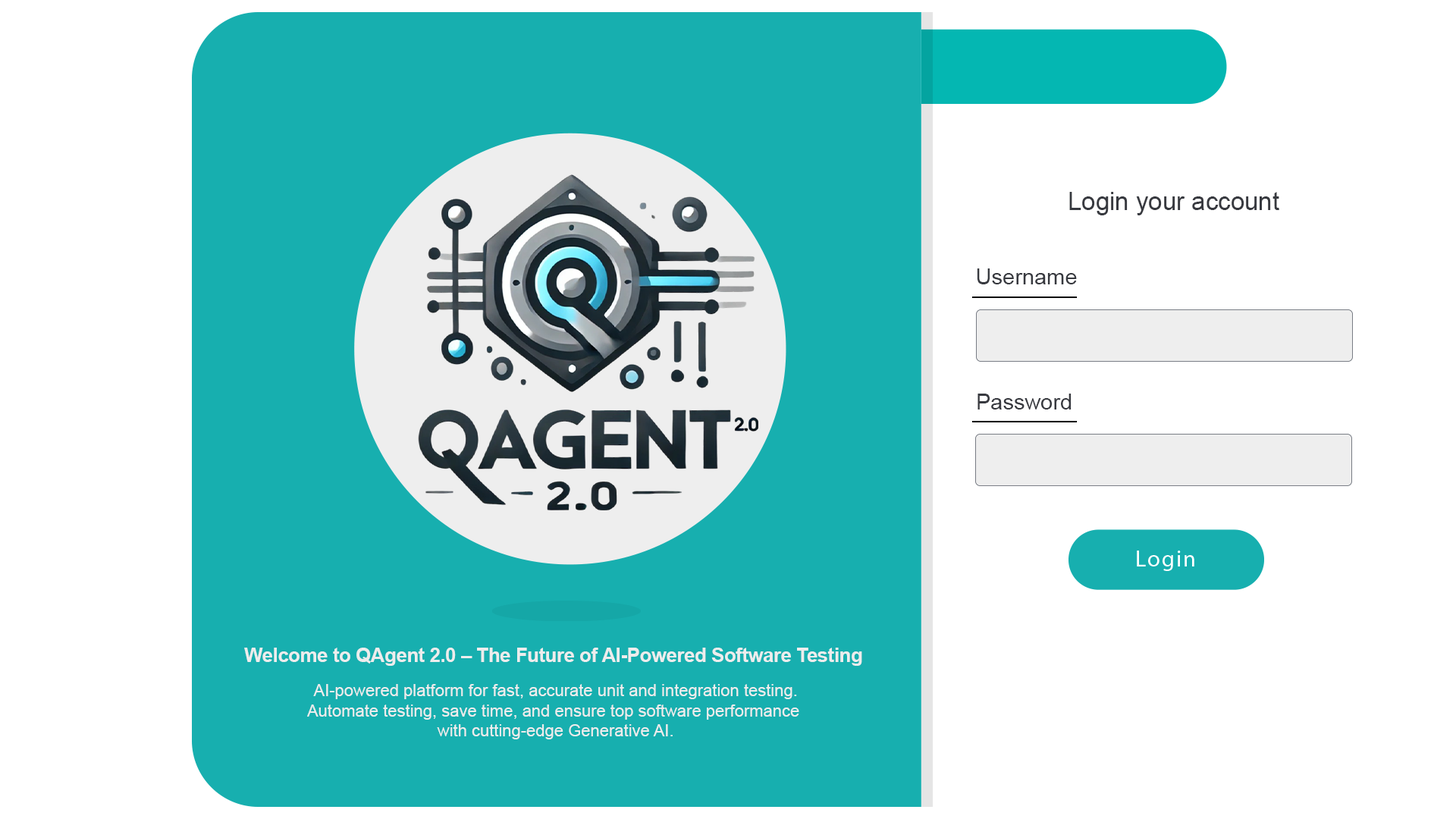
<style>
.page{position:relative;width:1456px;height:819px;background:#ffffff}
.page>*{position:absolute;margin:0}
.t1{font:25px "ArialMT";color:#373a40}
.t2{font:22px "ArialMT";color:#373a40}
.t3{font:19.7px "Arial-BoldMT";letter-spacing:-0.02em;color:#eeeeee}
.t4{font:16.7px "ArialMT";color:#eeeeee}
</style>
<div class="page">
<p class="t1" style="left:1069px;top:192px;width:210px;height:23px">Login your account</p>
<p class="t2" style="left:977px;top:268px;width:100px;height:16px">Username</p>
<p class="t2" style="left:977px;top:394px;width:95px;height:15px">Password</p>
<p class="t3" style="left:244px;top:648px;width:618px;height:18px">Welcome to QAgent 2.0 – The Future of AI-Powered Software Testing</p>
<p class="t4" style="left:307px;top:684px;width:492px;height:55px;text-align:center">AI-powered platform for fast, accurate unit and integration testing.<br>Automate testing, save time, and ensure top software performance <br>with cutting-edge Generative AI.</p>
</div>
